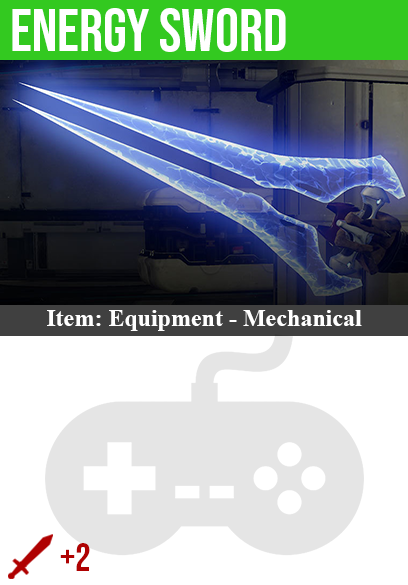
<style>
.page{position:relative;width:408px;height:585px;background:#ffffff}
.page>*{position:absolute;margin:0}
.t1{font:60px "BebasNeue-Regular";color:#ffffff}
.t2{font:24px "TimesNewRomanPS-BoldMT";color:#ffffff}
.t3{font:40px "BebasNeue-Regular";color:#af0202}
</style>
<div class="page">
<p class="t1" style="left:12px;top:8px;width:274px;height:44px">energy sword</p>
<p class="t2" style="left:47px;top:310px;width:315px;height:21px">Item: Equipment - Mechanical</p>
<p class="t3" style="left:60px;top:543px;width:30px;height:28px">+2</p>
</div>
